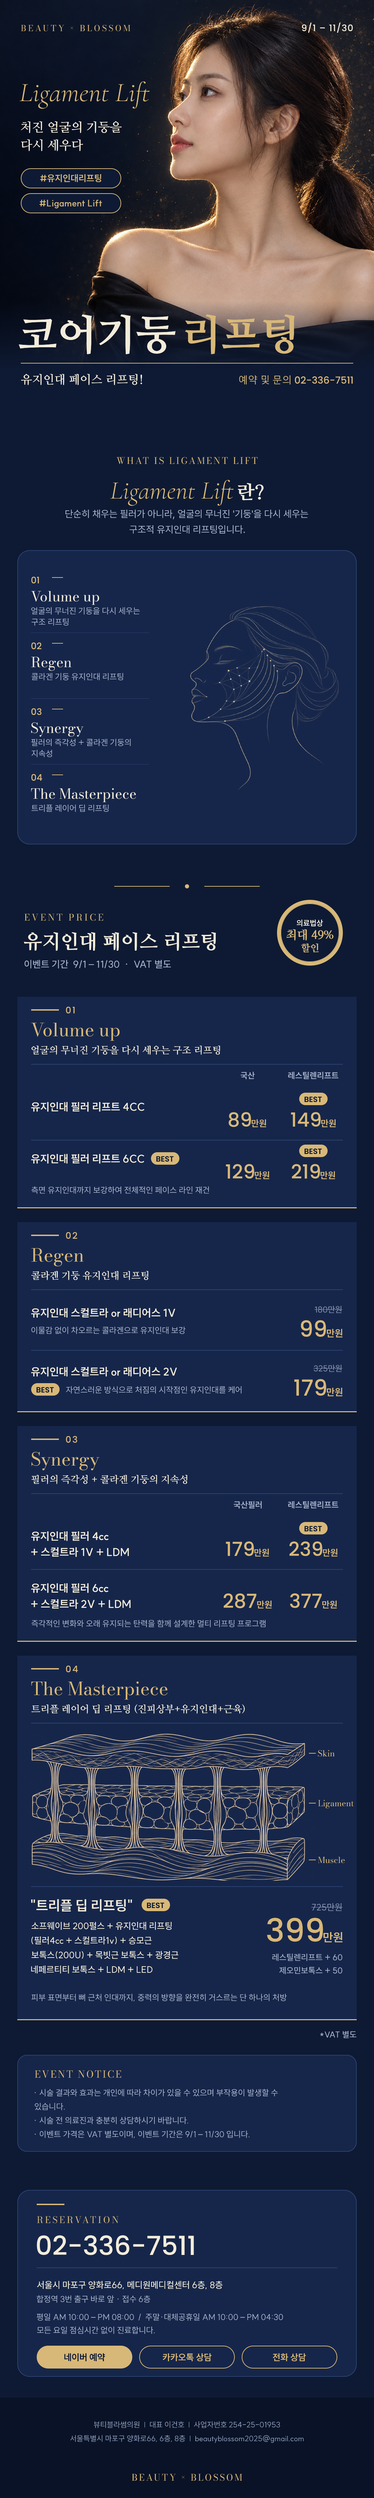
<style>
.page{position:relative;width:374px;height:2498px;background:#16264a}
.page>*{position:absolute;margin:0}
.t1{font:8.3px "BodoniModa-Regular";letter-spacing:0.22em;color:#d8b878}
.t2{font:9px "Poppins-Medium";letter-spacing:0.06em;color:#f3ecda}
.t3{font:27px "CormorantGaramond-LightItalic";color:#d8b878}
.t4{font:12.5px "NanumMyeongjoBold";color:#f3ecda}
.t5{font:9px "SUIT-Bold";color:#d8b878}
.t6{font:41.5px "NanumMyeongjoExtraBold";color:#f3ecda}
.t7{font:41.5px "NanumMyeongjoExtraBold";color:#d8b878}
.t8{font:11.8px "NanumMyeongjoBold";color:#f3ecda}
.t9{font:9.7px "Poppins-Medium";color:#d8b878}
.t10{font:9px "BodoniModa-Regular";letter-spacing:0.16em}
.t11{font:25.6px "CormorantGaramond-LightItalic";color:#d8b878}
.t12{font:18.7px "NanumMyeongjoExtraBold";color:#f3ecda}
.t13{font:9.7px "Pretendard-Regular";color:#a8b3cc}
.t14{font:9px "Poppins-Medium";color:#d8b878}
.t15{font:13.8px "BodoniModa-Regular";color:#f3ecda}
.t16{font:8.3px "SUIT-Regular";color:#a8b3cc}
.t17{font:9px "BodoniModa-Regular";letter-spacing:0.2em;color:#d8b878}
.t18{font:11.8px "NanumMyeongjoExtraBold";color:#d8b878}
.t19{font:7.6px "SUIT-Bold";color:#f3ecda}
.t20{font:19.4px "NanumMyeongjoExtraBold";color:#f3ecda}
.t21{font:9.7px "NanumMyeongjoExtraBold";color:#d8b878}
.t22{font:9.7px "SUIT-Medium";color:#a8b3cc}
.t23{font:9px "Poppins-Medium";letter-spacing:0.12em;color:#d8b878}
.t24{font:18px "BodoniModa-Regular";color:#d8b878}
.t25{font:9.7px "NanumMyeongjoBold";color:#f3ecda}
.t26{font:8.3px "SUIT-Bold";color:#a8b3cc}
.t27{font:7.6px "Poppins-SemiBold";color:#0e1a33}
.t28{font:10.7px "SUIT-Bold";color:#f3ecda}
.t29{font:19.4px "Poppins-Medium";color:#d8b878}
.t30{font:8.3px "SUIT-Medium";color:#7f8cab}
.t31{font:22.2px "Poppins-Medium";color:#d8b878}
.t32{font:9.7px "SUIT-Bold";color:#d8b878}
.t33{font:8.3px "BodoniModa-Regular";color:#d8b878}
.t34{font:13.8px "SUIT-Bold";color:#f3ecda}
.t35{font:9px "SUIT-Medium";color:#7f8cab}
.t36{font:9px "SUIT-Medium";color:#f3ecda}
.t37{font:31.8px "Poppins-Medium";color:#d8b878}
.t38{font:11.8px "SUIT-Bold";color:#d8b878}
.t39{font:8.3px "SUIT-Medium";color:#a8b3cc}
.t40{font:9.7px "BodoniModa-Regular";letter-spacing:0.12em;color:#d8b878}
.t41{font:26.3px "Poppins-Medium";color:#f3ecda}
.t42{font:9px "SUIT-Bold";color:#0e1a33}
.t43{font:7.6px "SUIT-Regular";color:#8c99b8}
.t44{font:9px "BodoniModa-Regular";letter-spacing:0.16em;color:#d8b878}
</style>
<div class="page">
<p class="t1" style="left:21px;top:25px;width:109px;height:7px">BEAUTY × BLOSSOM</p>
<p class="t2" style="left:302px;top:22px;width:51px;height:11px">9/1 – 11/30</p>
<p class="t3" style="left:19px;top:81px;width:131px;height:28px">Ligament Lift</p>
<p class="t4" style="left:21px;top:121px;width:101px;height:12px">처진 얼굴의 기둥을</p>
<p class="t4" style="left:21px;top:139px;width:62px;height:12px">다시 세우다</p>
<p class="t5" style="left:40px;top:174px;width:61px;height:8px">#유지인대리프팅</p>
<p class="t5" style="left:39px;top:200px;width:63px;height:8px">#Ligament Lift</p>
<p class="t6" style="left:19px;top:314px;width:157px;height:40px">코어기둥</p>
<p class="t7" style="left:185px;top:314px;width:110px;height:40px">리프팅</p>
<p class="t8" style="left:21px;top:374px;width:121px;height:11px">유지인대 페이스 리프팅!</p>
<p class="t9" style="left:239px;top:375px;width:114px;height:10px">예약 및 문의 02-336-7511</p>
<p class="t10" style="left:116px;top:457px;width:141px;height:7px">WHAT IS LIGAMENT LIFT</p>
<p class="t11" style="left:110px;top:480px;width:123px;height:26px">Ligament Lift</p>
<p class="t12" style="left:237px;top:483px;width:26px;height:17px">란?</p>
<p class="t13" style="left:65px;top:509px;width:243px;height:10px">단순히 채우는 필러가 아니라, 얼굴의 무너진 '기둥'을 다시 세우는</p>
<p class="t13" style="left:129px;top:525px;width:115px;height:9px">구조적 유지인대 리프팅입니다.</p>
<p class="t14" style="left:31px;top:576px;width:8px;height:7px">01</p>
<p class="t15" style="left:31px;top:591px;width:68px;height:14px">Volume up</p>
<p class="t16" style="left:31px;top:607px;width:109px;height:7px">얼굴의 무너진 기둥을 다시 세우는</p>
<p class="t16" style="left:32px;top:618px;width:37px;height:8px">구조 리프팅</p>
<p class="t14" style="left:31px;top:642px;width:11px;height:7px">02</p>
<p class="t15" style="left:31px;top:657px;width:40px;height:14px">Regen</p>
<p class="t16" style="left:32px;top:673px;width:91px;height:7px">콜라겐 기둥 유지인대 리프팅</p>
<p class="t14" style="left:31px;top:708px;width:11px;height:7px">03</p>
<p class="t15" style="left:31px;top:722px;width:52px;height:15px">Synergy</p>
<p class="t16" style="left:31px;top:738px;width:100px;height:8px">필러의 즉각성 + 콜라겐 기둥의</p>
<p class="t16" style="left:32px;top:749px;width:20px;height:8px">지속성</p>
<p class="t14" style="left:31px;top:774px;width:11px;height:7px">04</p>
<p class="t15" style="left:31px;top:788px;width:105px;height:14px">The Masterpiece</p>
<p class="t16" style="left:32px;top:804px;width:77px;height:8px">트리플 레이어 딥 리프팅</p>
<p class="t17" style="left:24px;top:914px;width:79px;height:7px">EVENT PRICE</p>
<p class="t18" style="left:286px;top:929px;width:47px;height:11px">최대 49%</p>
<p class="t19" style="left:297px;top:919px;width:26px;height:7px">의료법상</p>
<p class="t20" style="left:24px;top:932px;width:192px;height:19px">유지인대 페이스 리프팅</p>
<p class="t21" style="left:300px;top:943px;width:18px;height:9px">할인</p>
<p class="t22" style="left:25px;top:960px;width:146px;height:9px">이벤트 기간  9/1 – 11/30  ·  VAT 별도</p>
<p class="t23" style="left:66px;top:1006px;width:9px;height:7px">01</p>
<p class="t24" style="left:31px;top:1023px;width:89px;height:18px">Volume up</p>
<p class="t25" style="left:32px;top:1045px;width:188px;height:10px">얼굴의 무너진 기둥을 다시 세우는 구조 리프팅</p>
<p class="t26" style="left:240px;top:1071px;width:14px;height:8px">국산</p>
<p class="t26" style="left:288px;top:1071px;width:50px;height:8px">레스틸렌리프트</p>
<p class="t27" style="left:304px;top:1096px;width:18px;height:6px">BEST</p>
<p class="t28" style="left:31px;top:1101px;width:113px;height:11px">유지인대 필러 리프트 4CC</p>
<p class="t29" style="left:228px;top:1112px;width:23px;height:15px">89</p>
<p class="t5" style="left:251px;top:1119px;width:15px;height:8px">만원</p>
<p class="t29" style="left:290px;top:1112px;width:30px;height:14px">149</p>
<p class="t5" style="left:321px;top:1119px;width:14px;height:8px">만원</p>
<p class="t28" style="left:31px;top:1153px;width:113px;height:10px">유지인대 필러 리프트 6CC</p>
<p class="t27" style="left:156px;top:1156px;width:18px;height:6px">BEST</p>
<p class="t27" style="left:304px;top:1148px;width:18px;height:6px">BEST</p>
<p class="t29" style="left:225px;top:1164px;width:29px;height:14px">129</p>
<p class="t29" style="left:291px;top:1164px;width:29px;height:14px">219</p>
<p class="t5" style="left:254px;top:1171px;width:15px;height:8px">만원</p>
<p class="t5" style="left:320px;top:1171px;width:15px;height:8px">만원</p>
<p class="t16" style="left:32px;top:1186px;width:177px;height:8px">측면 유지인대까지 보강하여 전체적인 페이스 라인 재건</p>
<p class="t23" style="left:66px;top:1232px;width:11px;height:7px">02</p>
<p class="t24" style="left:31px;top:1248px;width:52px;height:18px">Regen</p>
<p class="t25" style="left:31px;top:1270px;width:117px;height:10px">콜라겐 기둥 유지인대 리프팅</p>
<p class="t28" style="left:31px;top:1307px;width:144px;height:10px">유지인대 스컬트라 or 래디어스 1V</p>
<p class="t30" style="left:314px;top:1305px;width:28px;height:8px">180만원</p>
<p class="t31" style="left:301px;top:1320px;width:25px;height:16px">99</p>
<p class="t16" style="left:31px;top:1326px;width:155px;height:8px">이물감 없이 차오르는 콜라겐으로 유지인대 보강</p>
<p class="t32" style="left:326px;top:1329px;width:16px;height:8px">만원</p>
<p class="t28" style="left:31px;top:1366px;width:146px;height:10px">유지인대 스컬트라 or 래디어스 2V</p>
<p class="t30" style="left:313px;top:1364px;width:29px;height:8px">325만원</p>
<p class="t16" style="left:66px;top:1386px;width:176px;height:7px">자연스러운 방식으로 처짐의 시작점인 유지인대를 케어</p>
<p class="t31" style="left:294px;top:1379px;width:32px;height:16px">179</p>
<p class="t27" style="left:36px;top:1387px;width:18px;height:6px">BEST</p>
<p class="t32" style="left:326px;top:1387px;width:16px;height:9px">만원</p>
<p class="t23" style="left:66px;top:1436px;width:11px;height:7px">03</p>
<p class="t24" style="left:32px;top:1451px;width:67px;height:19px">Synergy</p>
<p class="t25" style="left:32px;top:1474px;width:155px;height:10px">필러의 즉각성 + 콜라겐 기둥의 지속성</p>
<p class="t26" style="left:233px;top:1501px;width:28px;height:7px">국산필러</p>
<p class="t26" style="left:288px;top:1501px;width:50px;height:7px">레스틸렌리프트</p>
<p class="t27" style="left:304px;top:1526px;width:18px;height:5px">BEST</p>
<p class="t28" style="left:31px;top:1531px;width:78px;height:10px">유지인대 필러 4cc</p>
<p class="t29" style="left:226px;top:1541px;width:28px;height:15px">179</p>
<p class="t29" style="left:289px;top:1541px;width:33px;height:15px">239</p>
<p class="t28" style="left:31px;top:1547px;width:98px;height:10px">+ 스컬트라 1V + LDM</p>
<p class="t5" style="left:254px;top:1548px;width:15px;height:8px">만원</p>
<p class="t5" style="left:322px;top:1548px;width:15px;height:8px">만원</p>
<p class="t28" style="left:31px;top:1583px;width:77px;height:10px">유지인대 필러 6cc</p>
<p class="t28" style="left:31px;top:1599px;width:99px;height:10px">+ 스컬트라 2V + LDM</p>
<p class="t29" style="left:223px;top:1593px;width:33px;height:15px">287</p>
<p class="t5" style="left:256px;top:1600px;width:15px;height:8px">만원</p>
<p class="t29" style="left:289px;top:1593px;width:32px;height:15px">377</p>
<p class="t5" style="left:322px;top:1600px;width:14px;height:8px">만원</p>
<p class="t16" style="left:32px;top:1619px;width:234px;height:8px">즉각적인 변화와 오래 유지되는 탄력을 함께 설계한 멀티 리프팅 프로그램</p>
<p class="t23" style="left:66px;top:1665px;width:12px;height:7px">04</p>
<p class="t24" style="left:31px;top:1681px;width:137px;height:18px">The Masterpiece</p>
<p class="t25" style="left:32px;top:1704px;width:213px;height:9px">트리플 레이어 딥 리프팅 (진피상부+유지인대+근육)</p>
<p class="t33" style="left:318px;top:1749px;width:16px;height:7px">Skin</p>
<p class="t33" style="left:318px;top:1799px;width:36px;height:9px">Ligament</p>
<p class="t33" style="left:318px;top:1856px;width:27px;height:7px">Muscle</p>
<p class="t34" style="left:31px;top:1899px;width:101px;height:12px">"트리플 딥 리프팅"</p>
<p class="t27" style="left:147px;top:1902px;width:17px;height:6px">BEST</p>
<p class="t35" style="left:311px;top:1903px;width:31px;height:8px">725만원</p>
<p class="t36" style="left:32px;top:1922px;width:140px;height:7px">소프웨이브 200펄스 + 유지인대 리프팅</p>
<p class="t37" style="left:267px;top:1917px;width:56px;height:25px">399</p>
<p class="t36" style="left:31px;top:1936px;width:121px;height:8px">(필러4cc + 스컬트라1v) + 승모근</p>
<p class="t38" style="left:323px;top:1932px;width:19px;height:10px">만원</p>
<p class="t36" style="left:32px;top:1951px;width:146px;height:8px">보톡스(200U) + 목빗근 보톡스 + 광경근</p>
<p class="t39" style="left:272px;top:1953px;width:70px;height:8px">레스틸렌리프트 + 60</p>
<p class="t36" style="left:31px;top:1965px;width:122px;height:8px">네페르티티 보톡스 + LDM + LED</p>
<p class="t39" style="left:279px;top:1966px;width:63px;height:8px">제오민보톡스 + 50</p>
<p class="t16" style="left:32px;top:1993px;width:255px;height:8px">피부 표면부터 뼈 근처 인대까지, 중력의 방향을 완전히 거스르는 단 하나의 처방</p>
<p class="t39" style="left:320px;top:2030px;width:36px;height:8px">*VAT 별도</p>
<p class="t40" style="left:35px;top:2070px;width:86px;height:8px">EVENT NOTICE</p>
<p class="t16" style="left:35px;top:2088px;width:243px;height:8px">· 시술 결과와 효과는 개인에 따라 차이가 있을 수 있으며 부작용이 발생할 수</p>
<p class="t16" style="left:35px;top:2102px;width:30px;height:8px">있습니다.</p>
<p class="t16" style="left:35px;top:2116px;width:153px;height:8px">· 시술 전 의료진과 충분히 상담하시기 바랍니다.</p>
<p class="t16" style="left:35px;top:2130px;width:215px;height:8px">· 이벤트 가격은 VAT 별도이며, 이벤트 기간은 9/1 – 11/30 입니다.</p>
<p class="t17" style="left:37px;top:2216px;width:81px;height:7px">RESERVATION</p>
<p class="t41" style="left:37px;top:2235px;width:157px;height:20px">02-336-7511</p>
<p class="t36" style="left:37px;top:2280px;width:186px;height:9px">서울시 마포구 양화로66, 메디원메디컬센터 6층, 8층</p>
<p class="t16" style="left:37px;top:2295px;width:113px;height:7px">합정역 3번 출구 바로 앞 · 접수 6층</p>
<p class="t16" style="left:37px;top:2313px;width:246px;height:7px">평일 AM 10:00 – PM 08:00  /  주말·대체공휴일 AM 10:00 – PM 04:30</p>
<p class="t16" style="left:37px;top:2326px;width:118px;height:7px">모든 요일 점심시간 없이 진료합니다.</p>
<p class="t42" style="left:64px;top:2353px;width:41px;height:8px">네이버 예약</p>
<p class="t5" style="left:162px;top:2353px;width:49px;height:8px">카카오톡 상담</p>
<p class="t5" style="left:273px;top:2353px;width:33px;height:8px">전화 상담</p>
<p class="t43" style="left:93px;top:2421px;width:187px;height:7px">뷰티블라썸의원  |  대표 이건호  |  사업자번호 254-25-01953</p>
<p class="t43" style="left:70px;top:2434px;width:234px;height:8px">서울특별시 마포구 양화로66, 6층, 8층  |  beautyblossom2025@gmail.com</p>
<p class="t44" style="left:132px;top:2473px;width:110px;height:8px">BEAUTY × BLOSSOM</p>
</div>
